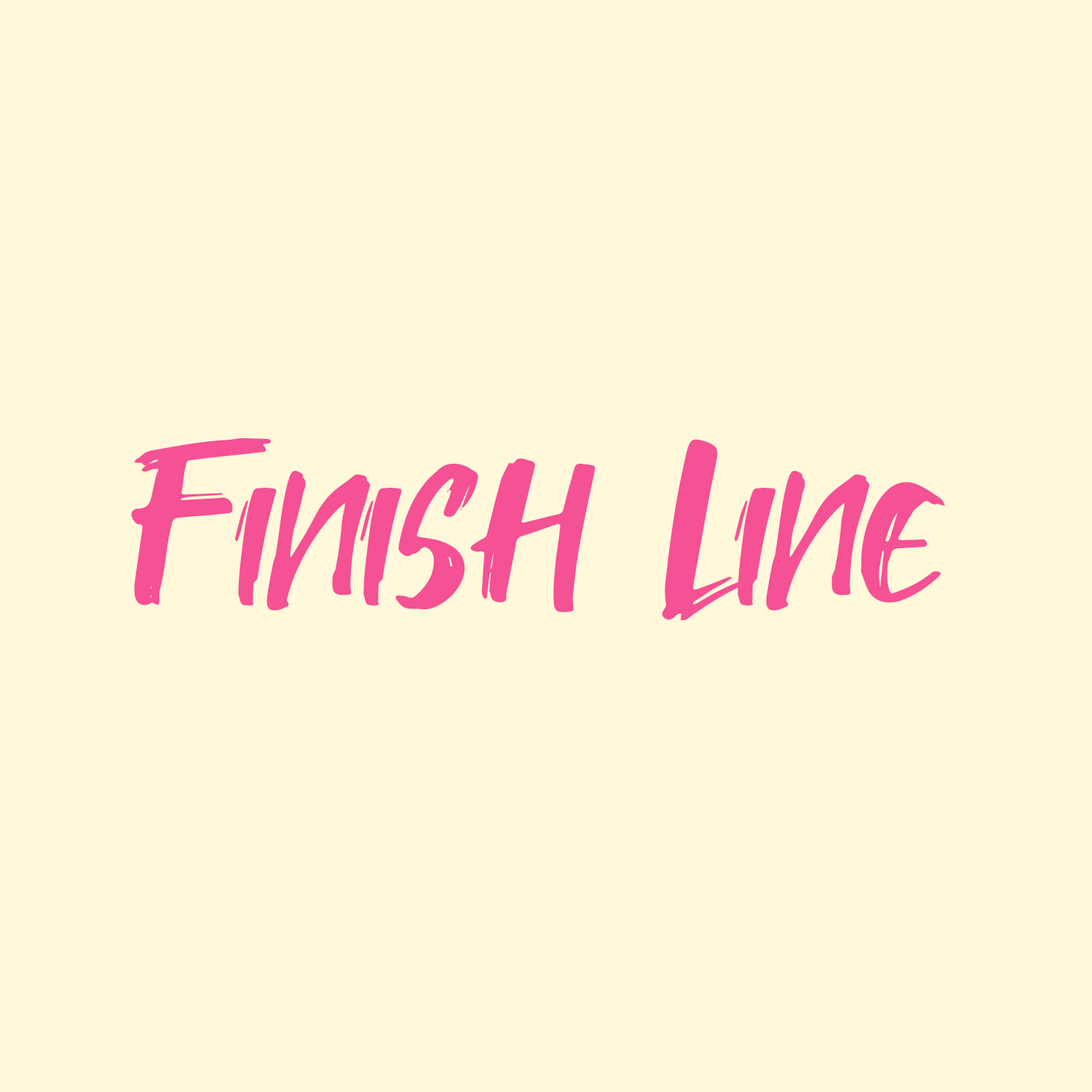
<style>
.page{position:relative;width:1092px;height:1092px;background:#fff8da}
.page>*{position:absolute;margin:0}
.t1{font:218.4px "Takota";color:#f55195}
</style>
<div class="page">
<p class="t1" style="left:131px;top:438px;width:815px;height:182px">Finish   Line</p>
</div>
